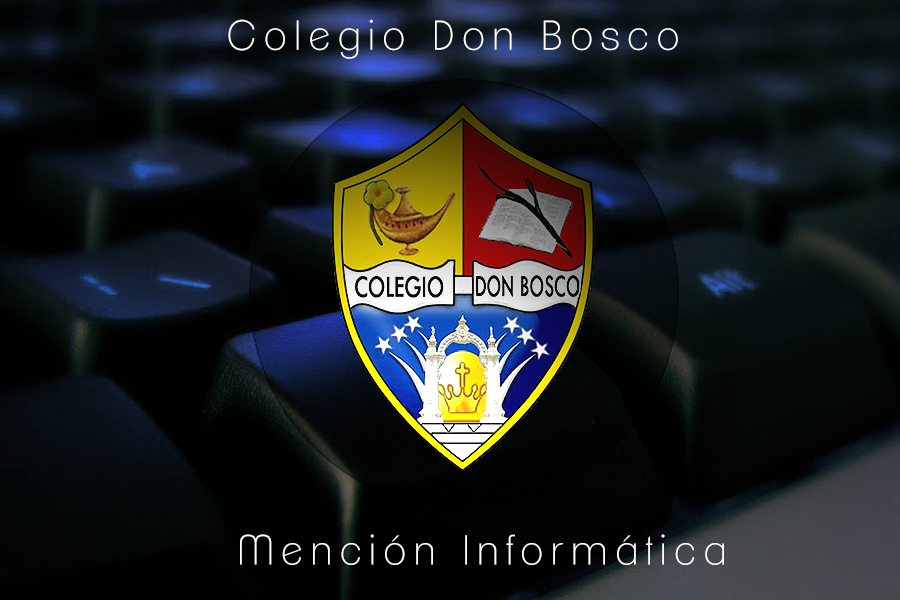
<style>
.page{position:relative;width:900px;height:600px}
.page>*{position:absolute;margin:0}
.t1{font:40.6px "ClementePDac-ExtraLight";letter-spacing:0.2em;color:#ffffff}
.t2{font:40.7px "ClementePDac-ExtraLight";letter-spacing:0.2em;color:#ffffff}
</style>
<div class="page">
<p class="t1" style="left:228px;top:19px;width:450px;height:40px">Colegio Don Bosco</p>
<p class="t2" style="left:240px;top:534px;width:484px;height:31px">Mención Informática</p>
</div>
